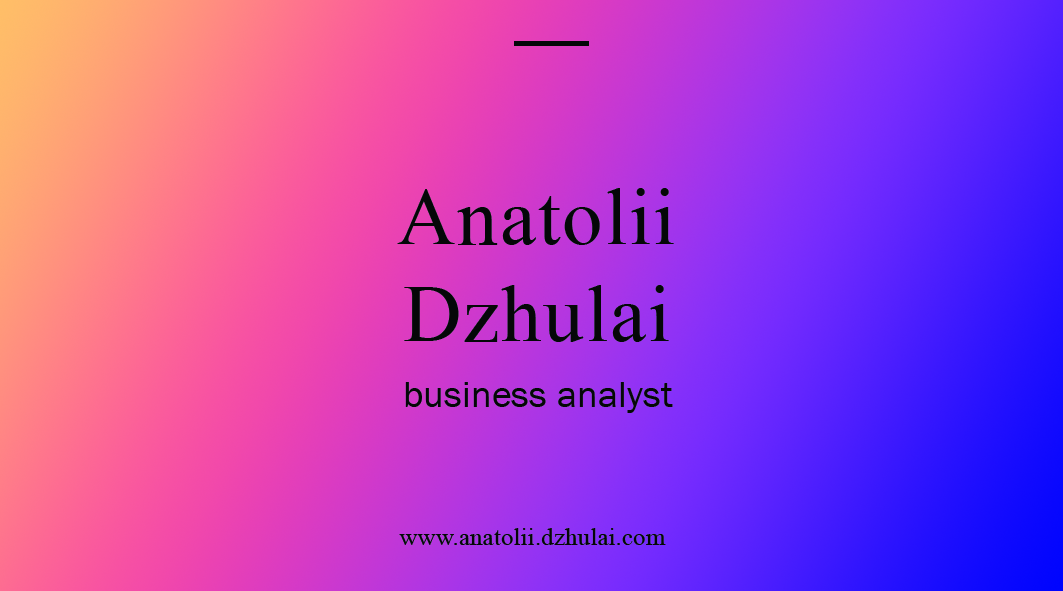
<style>
.page{position:relative;width:1063px;height:591px}
.page>*{position:absolute;margin:0}
.t1{font:80.7px "MongolianBaiti";letter-spacing:0.025em;color:#060708}
.t2{font:37.5px "FranklinGothic-Book";letter-spacing:0.01em;color:#050708}
.t3{font:25px "MongolianBaiti";letter-spacing:0.005em;color:#050708}
</style>
<div class="page">
<p class="t1" style="left:397px;top:188px;width:277px;height:154px;text-align:center">Anatolii<br>Dzhulai</p>
<p class="t2" style="left:405px;top:382px;width:268px;height:31px">business analyst</p>
<p class="t3" style="left:399px;top:528px;width:267px;height:17px">www.anatolii.dzhulai.com</p>
</div>
